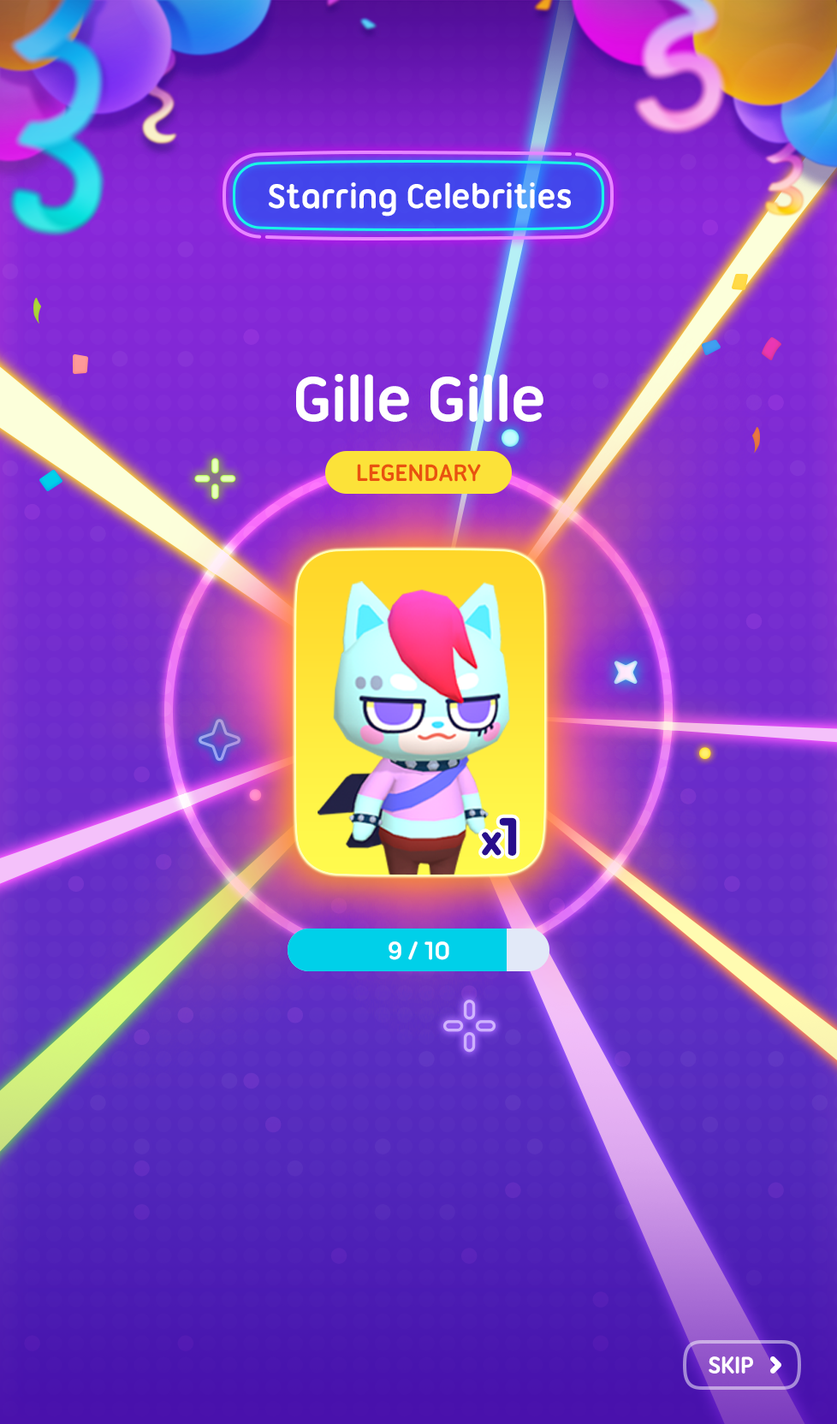
<style>
.page{position:relative;width:837px;height:1424px}
.page>*{position:absolute;margin:0}
.t1{font:36.8px "UbuntuTitling-Bold";letter-spacing:-0.025em;color:#ffffff}
.t2{font:68.5px "UbuntuTitling-Bold";letter-spacing:-0.025em;color:#ffffff}
.t3{font:25.7px "UbuntuTitling-Bold";letter-spacing:-0.025em;color:#e9520f;text-transform:uppercase}
.t4{font:42.2px "UbuntuTitling-Bold";letter-spacing:-0.025em;color:#280e8c;font-weight:bold}
.t5{font:55.4px "UbuntuTitling-Bold";letter-spacing:-0.025em;color:#280e8c;font-weight:bold}
.t6{font:27.4px "UbuntuTitling-Bold";letter-spacing:-0.025em;color:#ffffff}
.t7{font:25.5px "UbuntuTitling-Bold";letter-spacing:-0.025em;color:#ffffff;text-transform:uppercase}
</style>
<div class="page">
<p class="t1" style="left:269px;top:182px;width:302px;height:35px">Starring Celebrities</p>
<p class="t2" style="left:296px;top:374px;width:248px;height:48px">Gille Gille</p>
<p class="t3" style="left:357px;top:464px;width:124px;height:18px">Legendary</p>
<p class="t4" style="left:482px;top:817px;width:35px;height:39px">x<span class="t5">1</span></p>
<p class="t6" style="left:389px;top:942px;width:60px;height:18px">9 / 10</p>
<p class="t7" style="left:709px;top:1357px;width:44px;height:17px">Skip</p>
</div>
